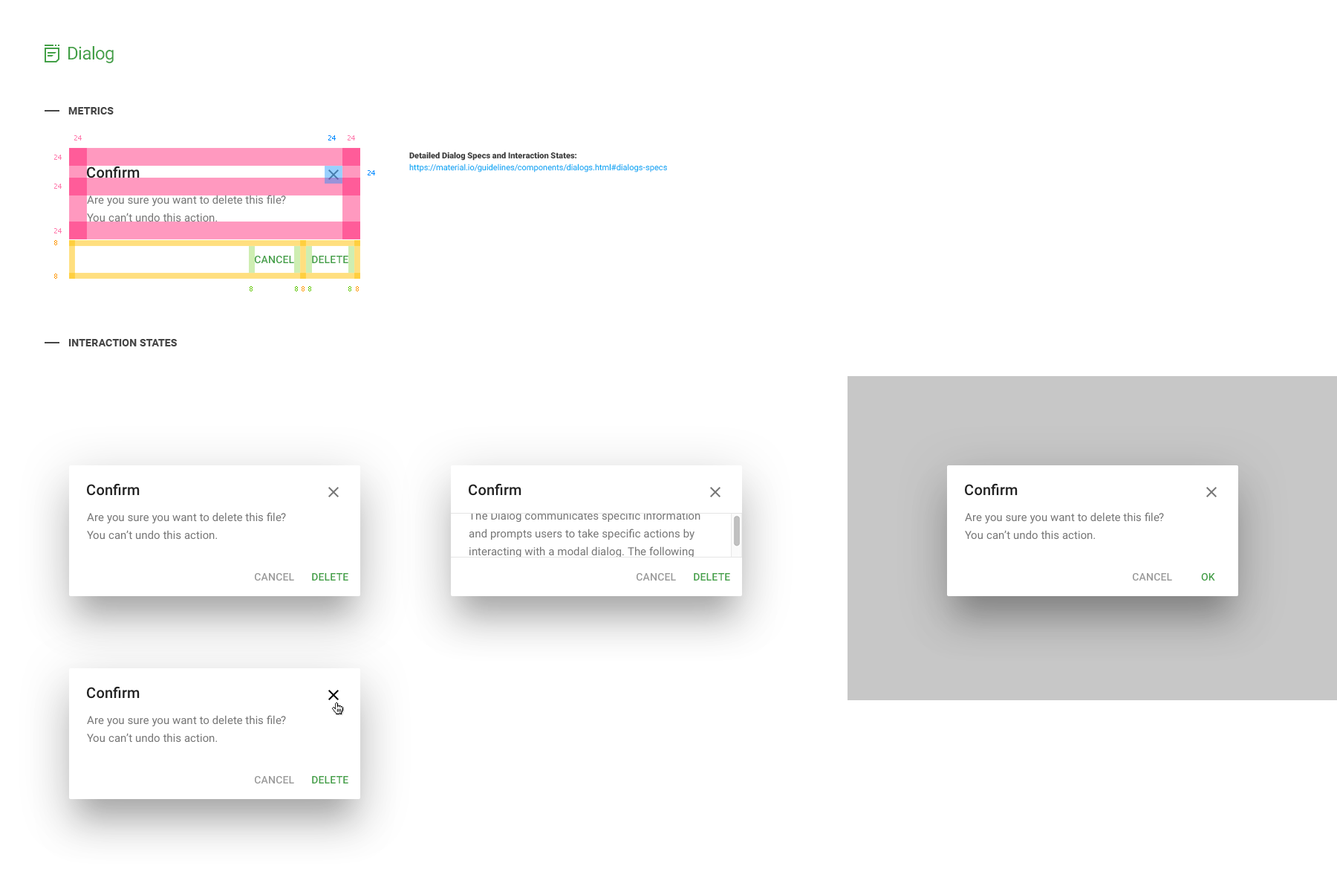
<style>
.page{position:relative;width:1337px;height:892px;background:#ffffff}
.page>*{position:absolute;margin:0}
.t1{font:17.8px "Roboto-Regular";letter-spacing:-0.025em;color:#43a047}
.t2{font:10.4px "Roboto-Bold";letter-spacing:0.01em;color:#454545;text-transform:uppercase}
.t3{font:6.7px "Tahoma";color:#ff7cae}
.t4{font:6.7px "Tahoma";color:#008aff}
.t5{font:8.2px/11.9px "Roboto-Regular";color:#03a9f4}
.t6{font:8.2px/11.9px "Roboto-Black";color:#383838}
.t7{font:14.9px "Roboto-Medium";letter-spacing:0.005em;color:#212121}
.t8{font:11.1px/17.8px "Roboto-Regular";letter-spacing:0.005em;color:#757575}
.t9{font:6.7px "Tahoma";color:#ff9600}
.t10{font:10.4px "Roboto-Medium";letter-spacing:0.01em;color:#43a047}
.t11{font:6.7px "Tahoma";color:#5ec600}
.t12{font:10.4px "Roboto-Medium";letter-spacing:0.01em;color:#9a9a9a}
</style>
<div class="page">
<p class="t1" style="left:68px;top:46px;width:46px;height:17px">Dialog</p>
<p class="t2" style="left:68px;top:107px;width:46px;height:7px">Metrics</p>
<p class="t3" style="left:74px;top:135px;width:8px;height:5px">24</p>
<p class="t4" style="left:328px;top:135px;width:8px;height:5px">24</p>
<p class="t3" style="left:348px;top:135px;width:7px;height:5px">24</p>
<p class="t3" style="left:54px;top:155px;width:8px;height:5px">24</p>
<p class="t5" style="left:409px;top:152px;width:258px;height:20px"><span class="t6">Detailed Dialog Specs and Interaction States:<br></span>https://material.io/guidelines/components/dialogs.html#dialogs-specs</p>
<p class="t7" style="left:87px;top:166px;width:53px;height:12px">Confirm</p>
<p class="t4" style="left:368px;top:170px;width:7px;height:5px">24</p>
<p class="t3" style="left:54px;top:184px;width:8px;height:5px">24</p>
<p class="t8" style="left:87px;top:195px;width:199px;height:27px">Are you sure you want to delete this file?<br>You can’t undo this action.</p>
<p class="t3" style="left:54px;top:228px;width:8px;height:5px">24</p>
<p class="t9" style="left:54px;top:240px;width:3px;height:5px">8</p>
<p class="t10" style="left:255px;top:256px;width:39px;height:8px">CANCEL</p>
<p class="t10" style="left:312px;top:256px;width:36px;height:7px">DELETE</p>
<p class="t9" style="left:54px;top:273px;width:3px;height:6px">8</p>
<p class="t11" style="left:250px;top:286px;width:3px;height:5px">8</p>
<p class="t11" style="left:295px;top:286px;width:3px;height:5px">8</p>
<p class="t9" style="left:302px;top:286px;width:3px;height:5px">8</p>
<p class="t11" style="left:308px;top:286px;width:3px;height:5px">8</p>
<p class="t11" style="left:348px;top:286px;width:3px;height:5px">8</p>
<p class="t9" style="left:356px;top:286px;width:3px;height:5px">8</p>
<p class="t2" style="left:68px;top:339px;width:109px;height:7px">Interaction states</p>
<p class="t7" style="left:87px;top:483px;width:53px;height:13px">Confirm</p>
<p class="t7" style="left:469px;top:483px;width:53px;height:13px">Confirm</p>
<p class="t7" style="left:965px;top:483px;width:53px;height:13px">Confirm</p>
<p class="t8" style="left:87px;top:512px;width:199px;height:27px">Are you sure you want to delete this file?<br>You can’t undo this action.</p>
<p class="t8" style="left:469px;top:510px;width:232px;height:48px">The Dialog communicates specific information and prompts users to take specific actions by interacting with a modal dialog. The following example demonstrates the Dialog in action.</p>
<p class="t8" style="left:965px;top:512px;width:199px;height:27px">Are you sure you want to delete this file?<br>You can’t undo this action.</p>
<p class="t12" style="left:255px;top:573px;width:39px;height:8px">CANCEL</p>
<p class="t10" style="left:312px;top:573px;width:36px;height:7px">DELETE</p>
<p class="t12" style="left:637px;top:573px;width:39px;height:8px">CANCEL</p>
<p class="t10" style="left:694px;top:573px;width:36px;height:7px">DELETE</p>
<p class="t12" style="left:1133px;top:573px;width:39px;height:8px">CANCEL</p>
<p class="t10" style="left:1201px;top:573px;width:15px;height:8px">OK</p>
<p class="t7" style="left:87px;top:686px;width:53px;height:12px">Confirm</p>
<p class="t8" style="left:87px;top:715px;width:199px;height:27px">Are you sure you want to delete this file?<br>You can’t undo this action.</p>
<p class="t12" style="left:255px;top:776px;width:39px;height:8px">CANCEL</p>
<p class="t10" style="left:312px;top:776px;width:36px;height:7px">DELETE</p>
</div>
